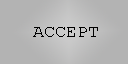
<style>
.page{position:relative;width:128px;height:64px;background:#b3b3b3}
.page>*{position:absolute;margin:0}
.t1{font:18px "CourierNewPSMT";color:#000000}
</style>
<div class="page">
<p class="t1" style="left:33px;top:27px;width:65px;height:10px">ACCEPT</p>
</div>
